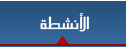
<style>
.page{position:relative;width:126px;height:48px}
.page>*{position:absolute;margin:0}
.t1{font:20.4px "SC_KHALID";color:#ffffff;scale:0.9 1}
</style>
<div class="page">
<p class="t1" style="left:40px;top:13px;width:49px;height:19px">الأنشطة</p>
</div>
